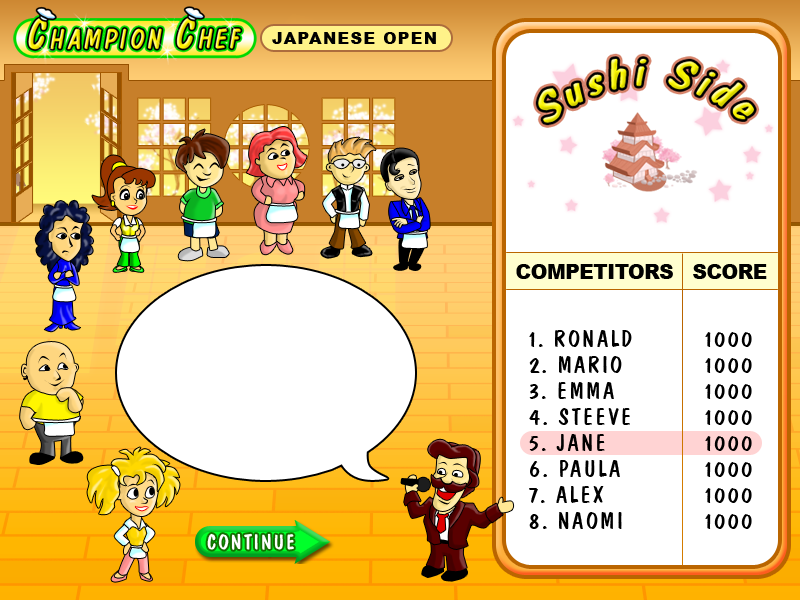
<style>
.page{position:relative;width:800px;height:600px;background:#ffffff}
.page>*{position:absolute;margin:0}
.t1{font:15.9px "Arial-Black";letter-spacing:0.09em;color:#000000;font-variant:small-caps}
.t2{font:19.7px "Arial-Black";letter-spacing:-0.01em;color:#000000;text-transform:uppercase}
.t3{font:24.1px/26px "DomCasualBT-Regular";letter-spacing:0.09em;color:#000000;font-variant:small-caps}
</style>
<div class="page">
<p class="t1" style="left:272px;top:32px;width:164px;height:12px">JAPANESE OPEN</p>
<p class="t2" style="left:516px;top:264px;width:251px;height:15px">competitors   SCORE</p>
<p class="t3" style="left:529px;top:330px;width:103px;height:199px">1. RONALD<br>2. MARIO<br>3. EMMA<br>4. STEEVE<br>5. JANE<br>6. PAULA<br>7. ALEX<br>8. NAOMI</p>
<p class="t3" style="left:705px;top:332px;width:47px;height:197px">1000<br>1000<br>1000<br>1000<br>1000<br>1000<br>1000<br>1000</p>
</div>
